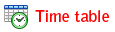
<style>
.page{position:relative;width:115px;height:32px;background:#ffffff}
.page>*{position:absolute;margin:0}
.t1{font:16px "BellGothicStd-Bold";color:#f90404}
</style>
<div class="page">
<p class="t1" style="left:35px;top:10px;width:74px;height:12px">Time table</p>
</div>
